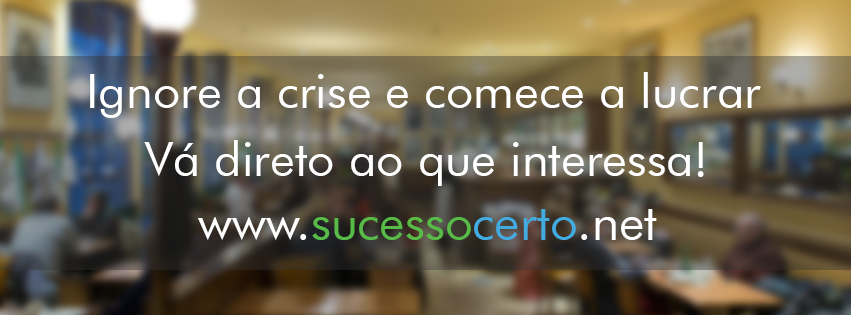
<style>
.page{position:relative;width:851px;height:315px}
.page>*{position:absolute;margin:0}
.t1{font:48px "FuturaBT-Book";color:#ffffff}
.t2{font:49px "FuturaBT-Book";color:#58ba47}
.t3{font:49px "FuturaBT-Book";color:#ffffff}
.t4{font:49px "FuturaBT-Book";color:#42abe0}
</style>
<div class="page">
<p class="t1" style="left:90px;top:72px;width:671px;height:46px">Ignore a crise e comece a lucrar</p>
<p class="t1" style="left:144px;top:140px;width:560px;height:46px">Vá direto ao que interessa!</p>
<p class="t2" style="left:198px;top:209px;width:459px;height:31px"><span class="t3">www.</span>sucesso<span class="t4">certo</span><span class="t3">.net</span></p>
</div>
